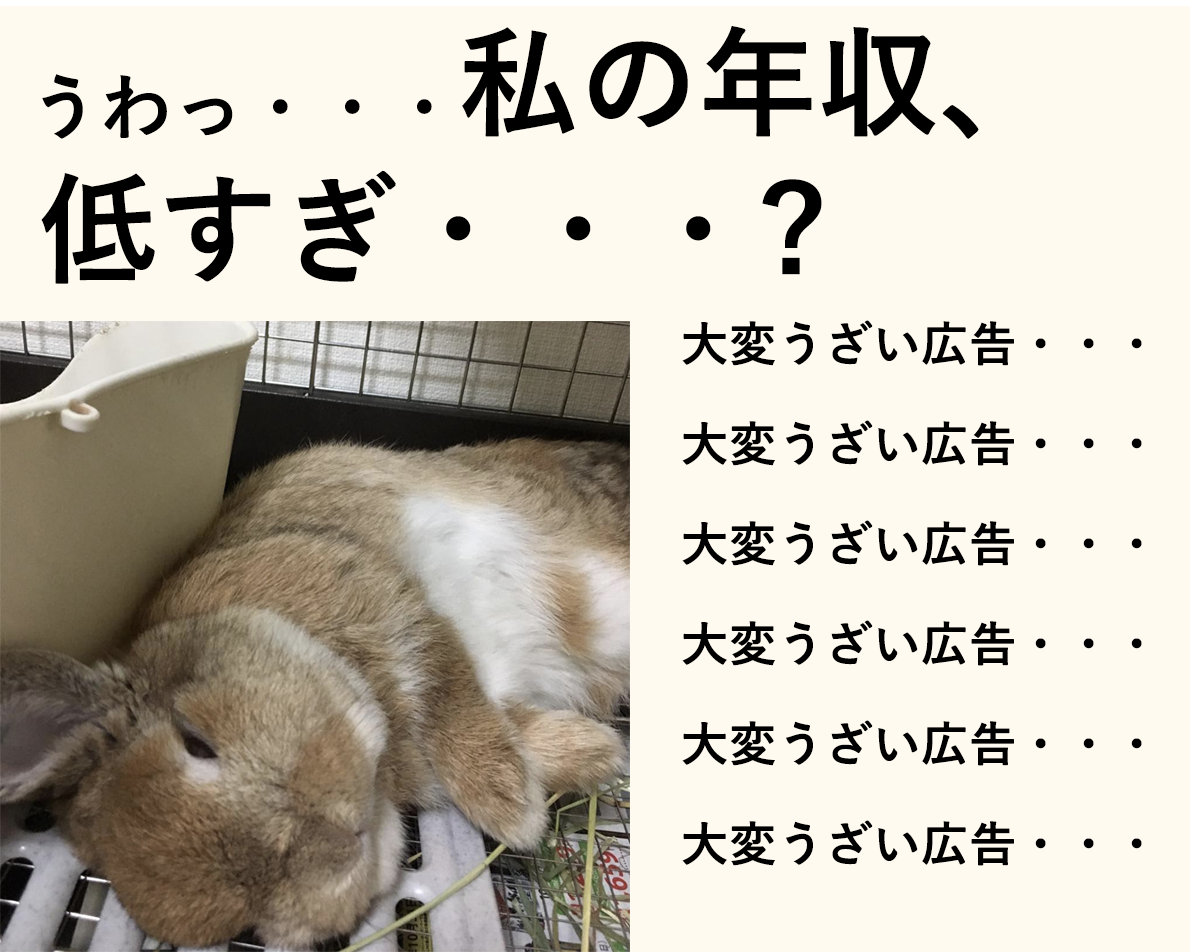
<style>
.page{position:relative;width:1190px;height:952px;background:#fffaf0}
.page>*{position:absolute;margin:0}
.t1{font:120px "YuGo-Bold";color:#000000}
.t2{font:72px "YuGo-Bold";color:#000000}
.t3{font:48px/100px "YuGo-Bold";color:#000000}
</style>
<div class="page">
<p class="t1" style="left:462px;top:26px;width:517px;height:113px">私の年収、</p>
<p class="t2" style="left:42px;top:74px;width:390px;height:65px">うわっ・・・</p>
<p class="t1" style="left:41px;top:170px;width:781px;height:114px">低すぎ・・・?</p>
<p class="t3" style="left:682px;top:320px;width:460px;height:546px">大変うざい広告・・・<br>大変うざい広告・・・<br>大変うざい広告・・・<br>大変うざい広告・・・<br>大変うざい広告・・・<br>大変うざい広告・・・</p>
</div>
